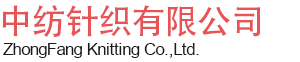
<style>
.page{position:relative;width:300px;height:62px;background:#ffffff}
.page>*{position:absolute;margin:0}
.t1{font:34px "AdobeHeitiStd-Regular";letter-spacing:-0.025em;color:#e85356}
.t2{font:17px "ArialMT";letter-spacing:-0.025em;color:#1a1a1a}
</style>
<div class="page">
<p class="t1" style="left:2px;top:5px;width:259px;height:32px">中纺针织有限公司</p>
<p class="t2" style="left:3px;top:43px;width:196px;height:15px">ZhongFang Knitting Co.,Ltd.</p>
</div>
